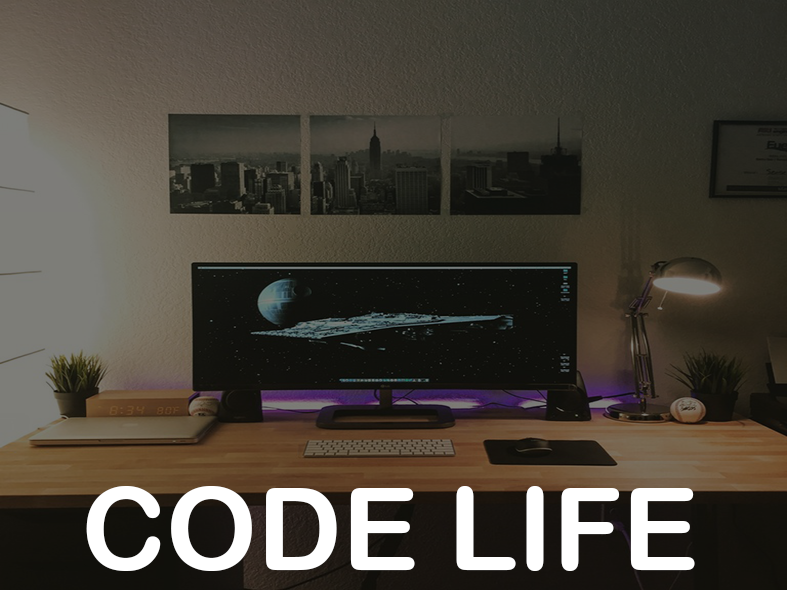
<style>
.page{position:relative;width:787px;height:590px}
.page>*{position:absolute;margin:0}
.t1{font:114.6px "ArialRoundedMTBold";color:#ffffff}
</style>
<div class="page">
<p class="t1" style="left:86px;top:486px;width:609px;height:85px">CODE LIFE</p>
</div>
